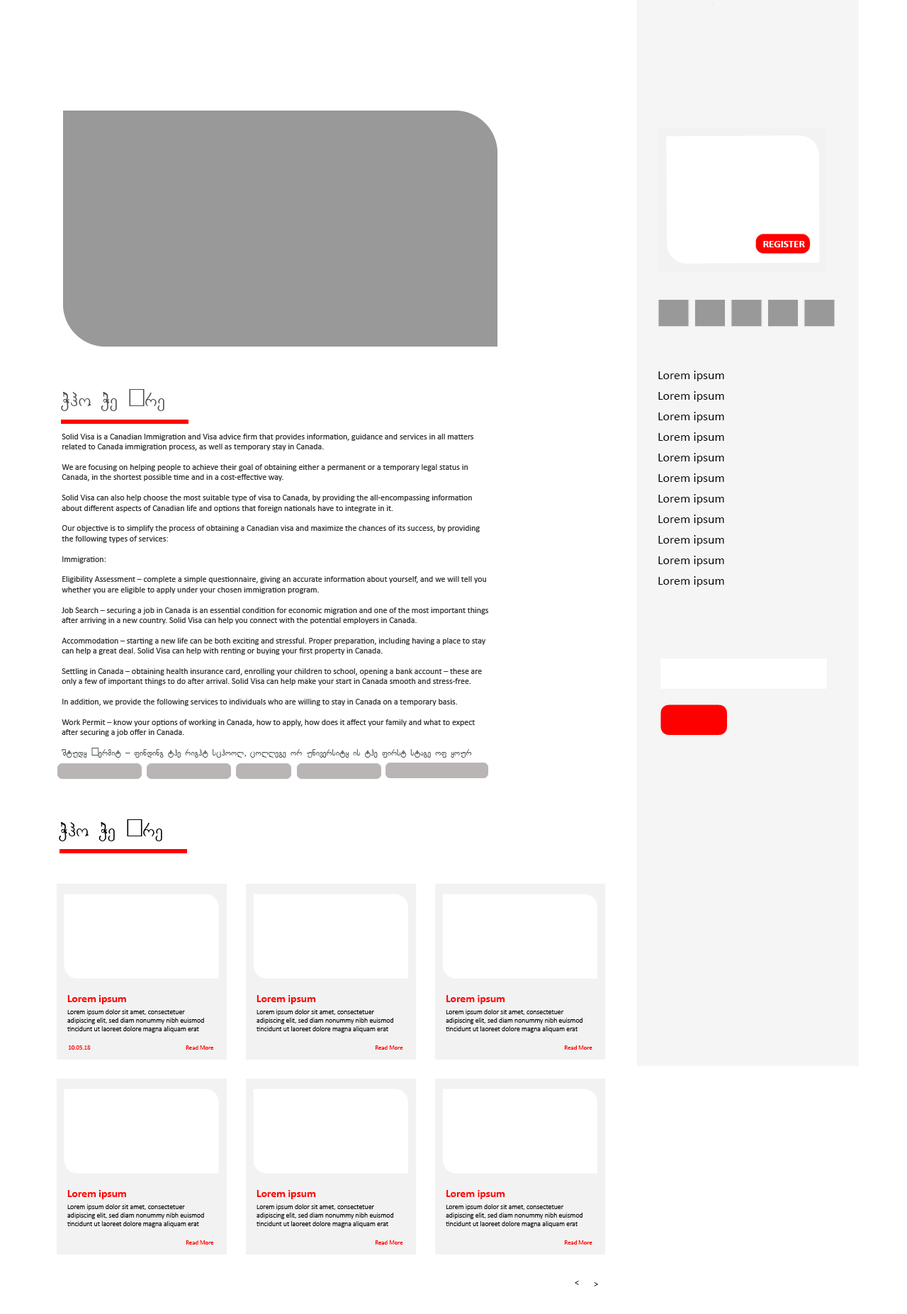
<style>
.page{position:relative;width:907px;height:1314px;background:#ffffff}
.page>*{position:absolute;margin:0}
.t1{font:10.6px "Calibri-Bold";color:#ffffff}
.t2{font:12.8px "Calibri";color:#000000}
.t3{font:8.5px "Calibri";color:#333333}
.t4{font:19.1px "MyriadPro-Regular";color:#4d4d4d}
.t5{font:8.5px "MyriadPro-Regular";color:#4d4d4d}
.t6{font:19.1px "MyriadPro-Regular";color:#000000}
.t7{font:11.1px "Calibri-Bold";color:#ff0000}
.t8{font:7px "Calibri-Light";color:#000000}
.t9{font:6.2px "Calibri";color:#ff0000}
.t10{font:8.5px "Calibri";color:#000000}
</style>
<div class="page">
<p class="t1" style="left:763px;top:241px;width:42px;height:6px">REGISTER</p>
<p class="t2" style="left:659px;top:371px;width:65px;height:10px">Lorem ipsum</p>
<p class="t3" style="left:61px;top:389px;width:428px;height:369px"><span class="t4">Who We Are<br><br></span>Solid Visa is a Canadian Immigration and Visa advice firm that provides information, guidance and services in all matters related to Canada immigration process, as well as temporary stay in Canada.<br><br>We are focusing on helping people to achieve their goal of obtaining either a permanent or a temporary legal status in Canada, in the shortest possible time and in a cost-effective way.<br><br>Solid Visa can also help choose the most suitable type of visa to Canada, by providing the all-encompassing information about different aspects of Canadian life and options that foreign nationals have to integrate in it.<br><br>Our objective is to simplify the process of obtaining a Canadian visa and maximize the chances of its success, by providing the following types of services:<br><br>Immigration:<br><br>Eligibility Assessment – complete a simple questionnaire, giving an accurate information about yourself, and we will tell you whether you are eligible to apply under your chosen immigration program.<br><br>Job Search – securing a job in Canada is an essential condition for economic migration and one of the most important things after arriving in a new country. Solid Visa can help you connect with the potential employers in Canada.<br><br>Accommodation – starting a new life can be both exciting and stressful. Proper preparation, including having a place to stay can help a great deal. Solid Visa can help with renting or buying your first property in Canada.<br><br>Settling in Canada – obtaining health insurance card, enrolling your children to school, opening a bank account – these are only a few of important things to do after arrival. Solid Visa can help make your start in Canada smooth and stress-free.<br><br>In addition, we provide the following services to individuals who are willing to stay in Canada on a temporary basis.<br><br>Work Permit – know your options of working in Canada, how to apply, how does it affect your family and what to expect after securing a job offer in Canada.<br><span class="t5"><br>Study Permit – finding the right school, college or university is the first stage of your Canadian education. Get help with school search, obtaining the required documents and settling in Canada as a student.<br><br>Visitor Visa – if you are planning to visit Canada, it is important that you know what is required to do so.<br><br>Business Visitor – as a business person, you may be able to work in Canada without a Work Permit, for a short</span></p>
<p class="t2" style="left:659px;top:391px;width:65px;height:11px">Lorem ipsum</p>
<p class="t2" style="left:659px;top:412px;width:65px;height:10px">Lorem ipsum</p>
<p class="t2" style="left:659px;top:432px;width:65px;height:11px">Lorem ipsum</p>
<p class="t2" style="left:659px;top:453px;width:65px;height:11px">Lorem ipsum</p>
<p class="t2" style="left:659px;top:474px;width:65px;height:10px">Lorem ipsum</p>
<p class="t2" style="left:659px;top:494px;width:65px;height:11px">Lorem ipsum</p>
<p class="t2" style="left:659px;top:515px;width:65px;height:10px">Lorem ipsum</p>
<p class="t2" style="left:659px;top:535px;width:65px;height:11px">Lorem ipsum</p>
<p class="t2" style="left:659px;top:556px;width:65px;height:10px">Lorem ipsum</p>
<p class="t2" style="left:659px;top:576px;width:65px;height:11px">Lorem ipsum</p>
<p class="t6" style="left:59px;top:819px;width:103px;height:22px">Who We Are</p>
<p class="t7" style="left:67px;top:995px;width:59px;height:9px">Lorem ipsum</p>
<p class="t7" style="left:257px;top:995px;width:59px;height:9px">Lorem ipsum</p>
<p class="t7" style="left:447px;top:995px;width:58px;height:9px">Lorem ipsum</p>
<p class="t8" style="left:67px;top:1009px;width:137px;height:24px">Lorem ipsum dolor sit amet, consectetuer adipiscing elit, sed diam nonummy nibh euismod tincidunt ut laoreet dolore magna aliquam erat volut</p>
<p class="t8" style="left:257px;top:1009px;width:136px;height:24px">Lorem ipsum dolor sit amet, consectetuer adipiscing elit, sed diam nonummy nibh euismod tincidunt ut laoreet dolore magna aliquam erat volut</p>
<p class="t8" style="left:446px;top:1009px;width:137px;height:24px">Lorem ipsum dolor sit amet, consectetuer adipiscing elit, sed diam nonummy nibh euismod tincidunt ut laoreet dolore magna aliquam erat volut</p>
<p class="t9" style="left:68px;top:1046px;width:23px;height:4px">10.05.18</p>
<p class="t9" style="left:186px;top:1046px;width:28px;height:4px">Read More</p>
<p class="t9" style="left:376px;top:1046px;width:27px;height:4px">Read More</p>
<p class="t9" style="left:565px;top:1046px;width:28px;height:4px">Read More</p>
<p class="t7" style="left:67px;top:1190px;width:59px;height:9px">Lorem ipsum</p>
<p class="t7" style="left:257px;top:1190px;width:59px;height:9px">Lorem ipsum</p>
<p class="t7" style="left:447px;top:1190px;width:58px;height:9px">Lorem ipsum</p>
<p class="t8" style="left:67px;top:1204px;width:137px;height:24px">Lorem ipsum dolor sit amet, consectetuer adipiscing elit, sed diam nonummy nibh euismod tincidunt ut laoreet dolore magna aliquam erat volut</p>
<p class="t8" style="left:257px;top:1204px;width:136px;height:24px">Lorem ipsum dolor sit amet, consectetuer adipiscing elit, sed diam nonummy nibh euismod tincidunt ut laoreet dolore magna aliquam erat volut</p>
<p class="t8" style="left:446px;top:1204px;width:137px;height:24px">Lorem ipsum dolor sit amet, consectetuer adipiscing elit, sed diam nonummy nibh euismod tincidunt ut laoreet dolore magna aliquam erat volut</p>
<p class="t9" style="left:186px;top:1240px;width:28px;height:5px">Read More</p>
<p class="t9" style="left:376px;top:1240px;width:27px;height:5px">Read More</p>
<p class="t9" style="left:565px;top:1240px;width:28px;height:5px">Read More</p>
<p class="t10" style="left:575px;top:1281px;width:4px;height:4px">&lt;</p>
<p class="t10" style="left:594px;top:1282px;width:4px;height:5px">&lt;</p>
</div>
